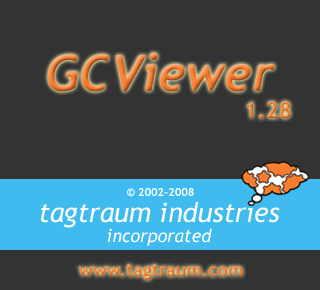
<style>
.page{position:relative;width:320px;height:290px;background:#333333}
.page>*{position:absolute;margin:0}
.t1{font:50px "Trebuchet-BoldItalic"}
.t2{font:22.6px "TrebuchetMS-Bold"}
.t3{font:11.2px "TrebuchetMS-Bold";color:#ffffff}
.t4{font:27px/20px "TrebuchetMS-Italic";color:#ffffff}
.t5{font:18px/20px "TrebuchetMS-Italic";color:#ffffff}
.t6{font:18px "TrebuchetMS-Bold";color:#f87c2e}
</style>
<div class="page">
<p class="t1" style="left:48px;top:52px;width:227px;height:40px">GCViewer</p>
<p class="t2" style="left:247px;top:101px;width:44px;height:18px">1.28</p>
<p class="t3" style="left:127px;top:188px;width:67px;height:9px">© 2002-2008</p>
<p class="t4" style="left:41px;top:202px;width:239px;height:44px;text-align:center">tagtraum industries<br><span class="t5">incorporated</span></p>
<p class="t6" style="left:78px;top:263px;width:165px;height:17px">www.tagtraum.com</p>
</div>
